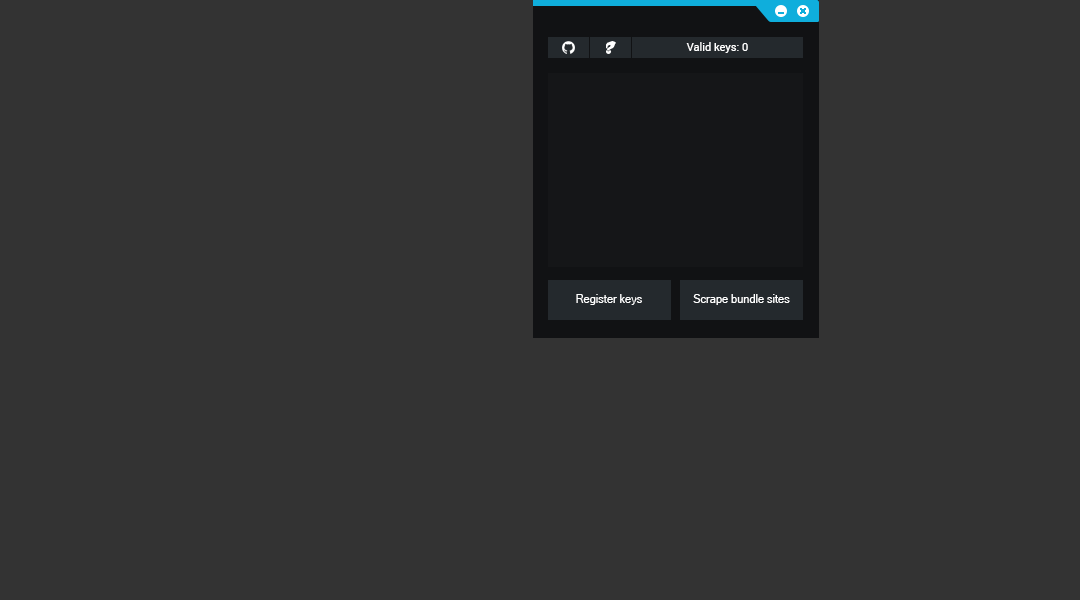
<style>
.page{position:relative;width:1080px;height:600px;background:#333333}
.page>*{position:absolute;margin:0}
.t1{font:11px "Roboto-Regular";color:#ffffff}
.t2{font:11px "MicrosoftSansSerif";color:#ffffff}
</style>
<div class="page">
<p class="t1" style="left:686px;top:42px;width:62px;height:11px">Valid keys: 0</p>
<p class="t2" style="left:576px;top:294px;width:66px;height:11px">Register keys</p>
<p class="t2" style="left:693px;top:294px;width:97px;height:11px">Scrape bundle sites</p>
</div>
